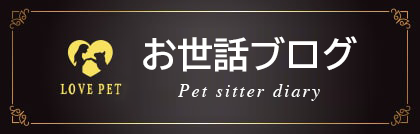
<style>
.page{position:relative;width:420px;height:134px}
.page>*{position:absolute;margin:0}
.t1{font:36px "TBUDGoStd-Bold";color:#ffffff}
.t2{font:18px "Times-Italic";letter-spacing:0.125em;color:#ffffff}
</style>
<div class="page">
<p class="t1" style="left:143px;top:36px;width:214px;height:36px">お世話ブログ</p>
<p class="t2" style="left:178px;top:84px;width:142px;height:17px">Pet sitter diary</p>
</div>
